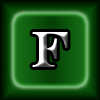
<style>
.page{position:relative;width:100px;height:100px}
.page>*{position:absolute;margin:0}
.t1{font:49.8px "EngraversMT";font-weight:bold;scale:0.9 1}
</style>
<div class="page">
<p class="t1" style="left:32px;top:32px;width:36px;height:35px">F</p>
</div>
